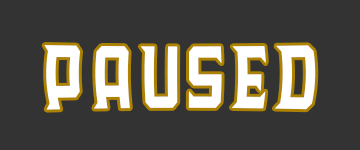
<style>
.page{position:relative;width:360px;height:150px;background:#333333}
.page>*{position:absolute;margin:0}
.t1{font:93.8px "Lorde-Havana";letter-spacing:0.1em;color:#ffffff;scale:0.75 1}
</style>
<div class="page">
<p class="t1" style="left:44px;top:45px;width:272px;height:65px">PAUSED</p>
</div>
